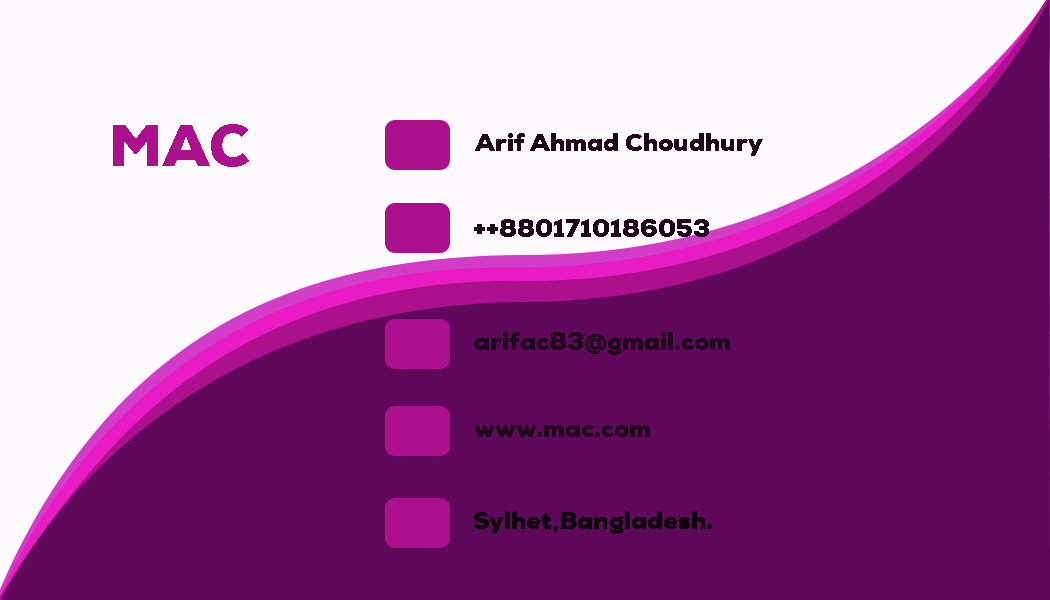
<style>
.page{position:relative;width:1050px;height:600px;background:#5f085c}
.page>*{position:absolute;margin:0}
.t1{font:58.3px "NexaW01-Black";color:#ac108d}
.t2{font:25px "NexaW01-Black";color:#20061b}
.t3{font:25px "NexaW01-Black";color:#0d010b}
</style>
<div class="page">
<p class="t1" style="left:113px;top:124px;width:136px;height:43px">MAC</p>
<p class="t2" style="left:475px;top:133px;width:288px;height:23px">Arif Ahmad Choudhury</p>
<p class="t2" style="left:474px;top:219px;width:235px;height:18px">++8801710186053</p>
<p class="t2" style="left:475px;top:332px;width:255px;height:23px">arifac83@gmail.com</p>
<p class="t2" style="left:474px;top:425px;width:176px;height:12px">www.mac.com</p>
<p class="t3" style="left:474px;top:511px;width:238px;height:23px">Sylhet,Bangladesh.</p>
</div>
